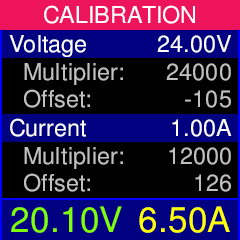
<style>
.page{position:relative;width:240px;height:240px;background:#000000}
.page>*{position:absolute;margin:0}
.t1{font:23.3px "FreeSans";letter-spacing:0.01em;color:#ffffff}
.t2{font:23.3px "FreeSans";letter-spacing:0.01em;color:#c0c0c0}
.t3{font:35px "FreeSans";letter-spacing:0.01em;color:#80ff00}
.t4{font:35px "FreeSans";letter-spacing:0.01em;color:#ffff00}
</style>
<div class="page">
<p class="t1" style="left:44px;top:5px;width:151px;height:19px">CALIBRATION</p>
<p class="t1" style="left:9px;top:35px;width:77px;height:22px">Voltage</p>
<p class="t1" style="left:157px;top:35px;width:74px;height:18px">24.00V</p>
<p class="t2" style="left:24px;top:63px;width:99px;height:22px">Multiplier:</p>
<p class="t2" style="left:166px;top:63px;width:65px;height:18px">24000</p>
<p class="t2" style="left:24px;top:89px;width:66px;height:19px">Offset:</p>
<p class="t2" style="left:185px;top:90px;width:46px;height:18px">-105</p>
<p class="t1" style="left:10px;top:118px;width:76px;height:19px">Current</p>
<p class="t1" style="left:172px;top:119px;width:60px;height:18px">1.00A</p>
<p class="t2" style="left:24px;top:147px;width:99px;height:22px">Multiplier:</p>
<p class="t2" style="left:169px;top:147px;width:62px;height:18px">12000</p>
<p class="t2" style="left:24px;top:173px;width:66px;height:19px">Offset:</p>
<p class="t2" style="left:195px;top:174px;width:36px;height:18px">126</p>
<p class="t3" style="left:11px;top:206px;width:111px;height:27px">20.10V</p>
<p class="t4" style="left:139px;top:206px;width:91px;height:27px">6.50A</p>
</div>
